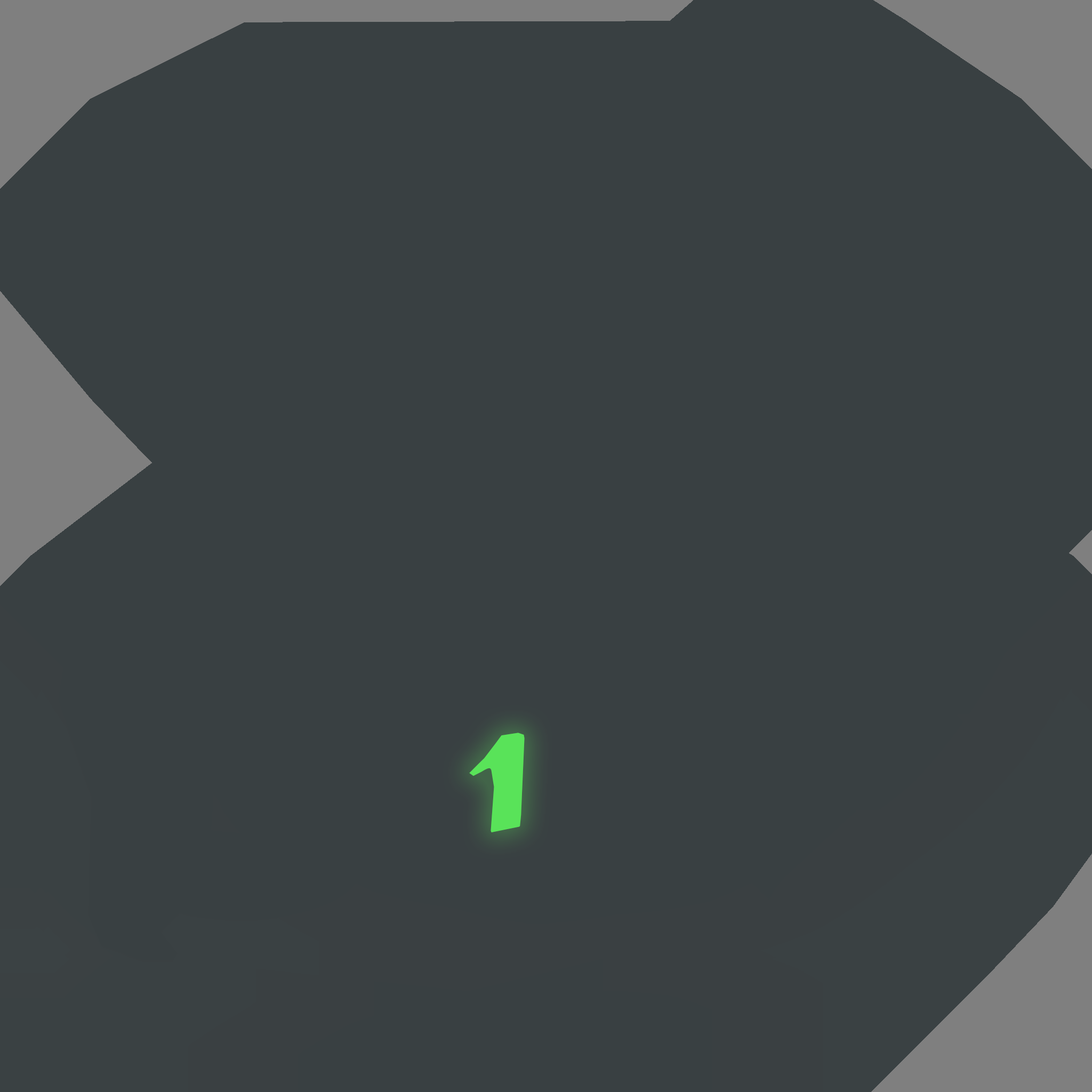
<style>
.page{position:relative;width:1092px;height:1092px;background:#394042}
.page>*{position:absolute;margin:0}
.t1{font:160px "Tarzan";color:#59e359}
</style>
<div class="page">
<p class="t1" style="left:469px;top:733px;width:56px;height:99px">1</p>
</div>
